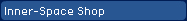
<style>
.page{position:relative;width:187px;height:21px;background:#285692}
.page>*{position:absolute;margin:0}
.t1{font:16px "Foxley816";color:#ffffff}
</style>
<div class="page">
<p class="t1" style="left:5px;top:7px;width:99px;height:10px">Inner-Space Shop</p>
</div>
